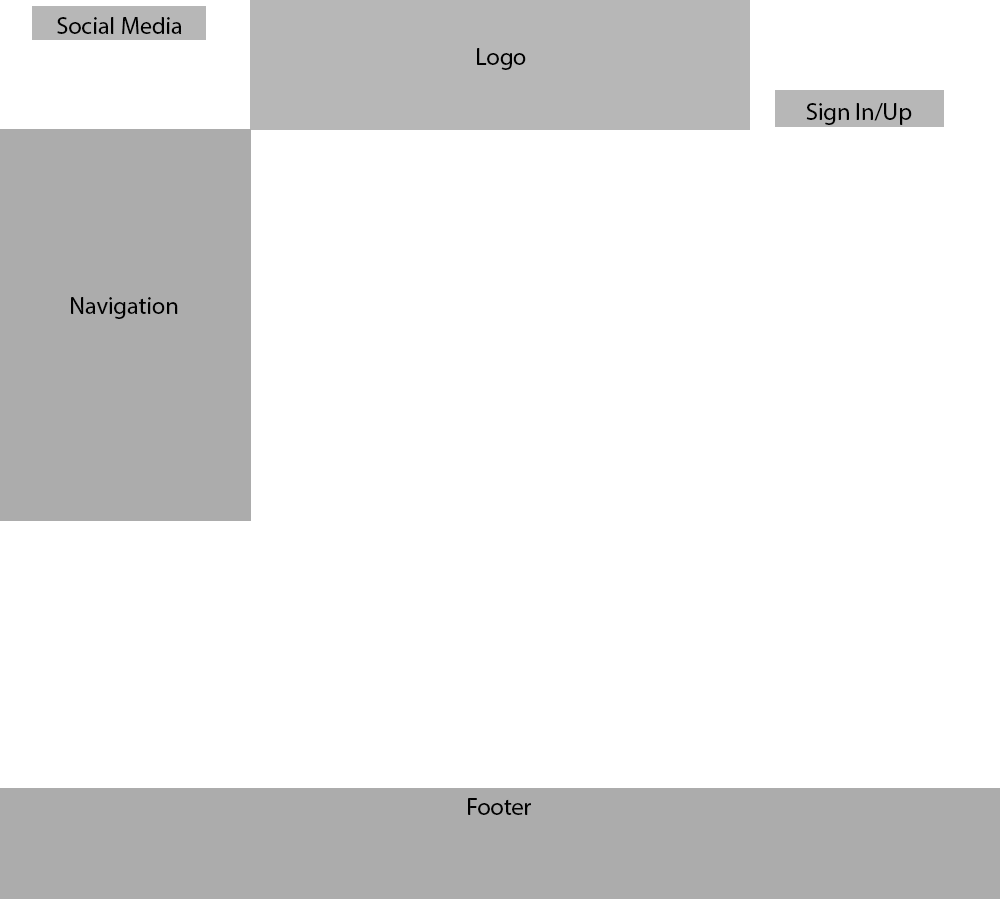
<style>
.page{position:relative;width:1000px;height:900px;background:#ffffff}
.page>*{position:absolute;margin:0}
.t1{font:24px "MyriadPro-Regular";color:#000000}
</style>
<div class="page">
<p class="t1" style="left:57px;top:17px;width:125px;height:17px">Social Media</p>
<p class="t1" style="left:477px;top:48px;width:49px;height:22px">Logo</p>
<p class="t1" style="left:806px;top:103px;width:106px;height:22px">Sign In/Up</p>
<p class="t1" style="left:71px;top:297px;width:107px;height:22px">Navigation</p>
<p class="t1" style="left:468px;top:798px;width:63px;height:17px">Footer</p>
</div>
